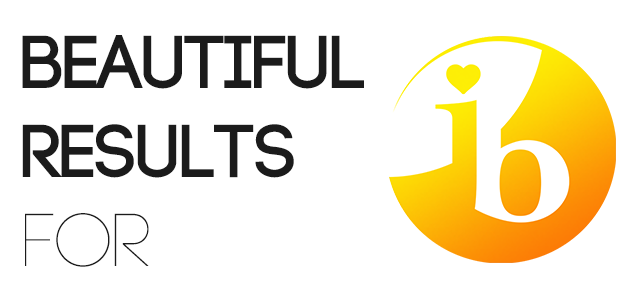
<style>
.page{position:relative;width:640px;height:300px;background:#ffffff}
.page>*{position:absolute;margin:0}
.t1{font:74.2px "Code-Bold";color:#1b1b1b}
.t2{font:74.2px "Code-Light";color:#1b1b1b}
</style>
<div class="page">
<p class="t1" style="left:22px;top:35px;width:342px;height:232px">Beautiful <br>Results<br><span class="t2">for</span></p>
</div>
